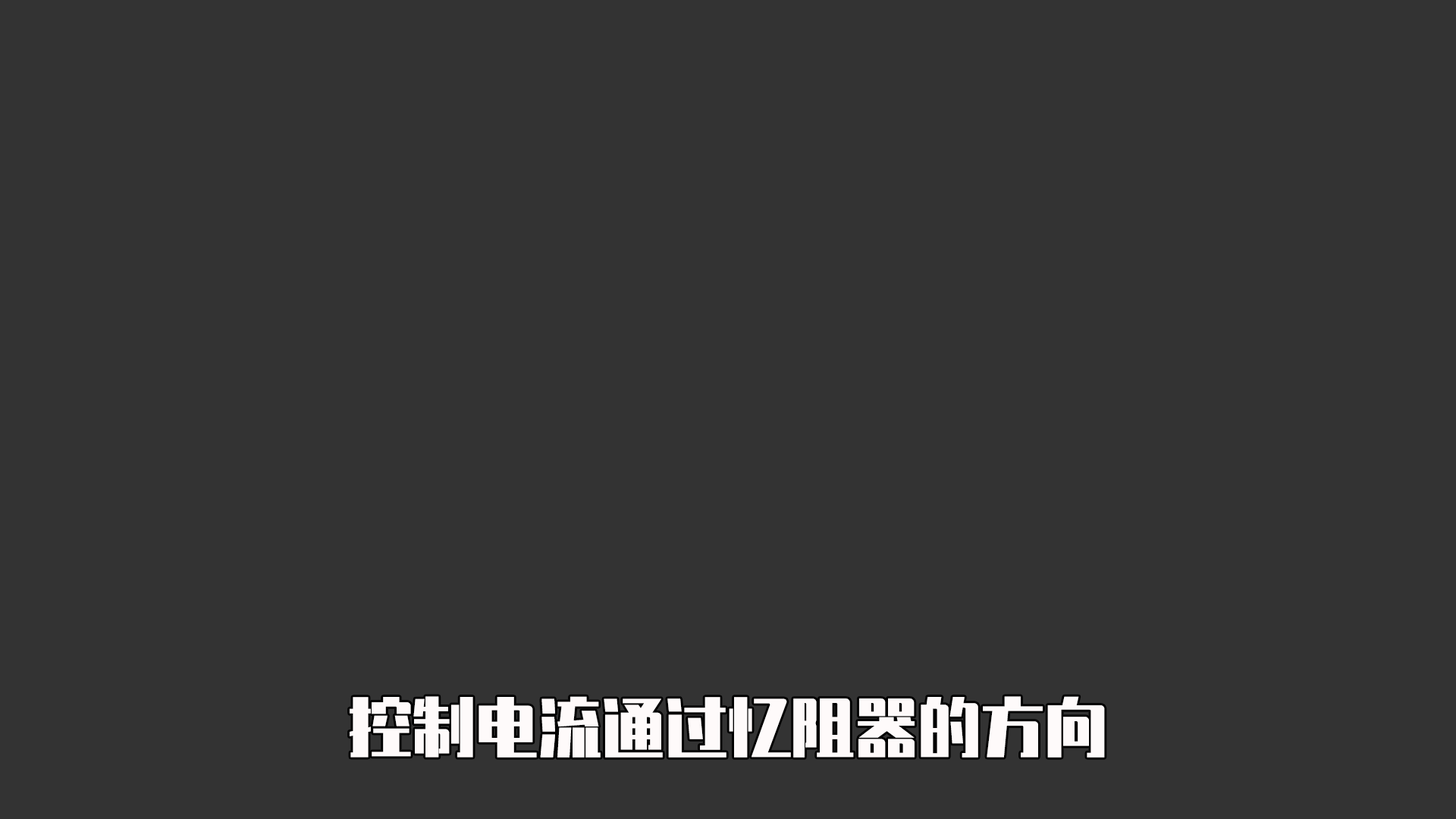
<style>
.page{position:relative;width:1456px;height:819px;background:#333333}
.page>*{position:absolute;margin:0}
.t1{font:63.2px "ZhenyanGB-Regular";color:#fefafa}
</style>
<div class="page">
<p class="t1" style="left:350px;top:696px;width:755px;height:62px">控制电流通过忆阻器的方向</p>
</div>
